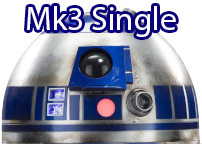
<style>
.page{position:relative;width:202px;height:144px;background:#ffffff}
.page>*{position:absolute;margin:0}
.t1{font:7.9px "MyriadPro-Regular";color:#ffffff}
</style>
<div class="page">
<p class="t1" style="left:27px;top:6px;width:149px;height:31px">Mk3 Single</p>
</div>
